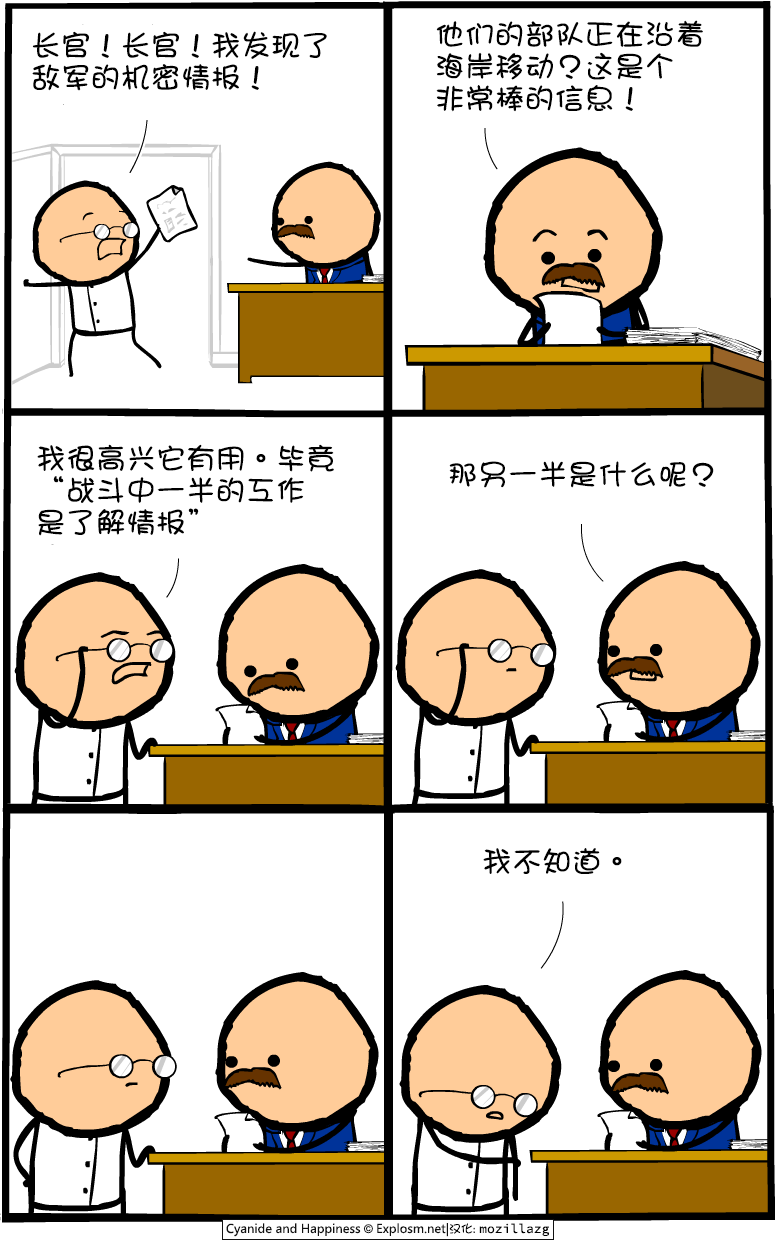
<style>
.page{position:relative;width:780px;height:1245px;background:#ffffff}
.page>*{position:absolute;margin:0}
.t1{font:30px/32px "DFGirl";color:#000000}
.t2{font:30px "DFGirl";color:#000000}
</style>
<div class="page">
<p class="t1" style="left:436px;top:20px;width:267px;height:92px">他们的部队正在沿着<br>海岸移动？这是个<br>非常棒的信息！</p>
<p class="t1" style="left:32px;top:31px;width:295px;height:60px">长官！长官！我发现了<br>敌军的机密情报！</p>
<p class="t1" style="left:37px;top:444px;width:297px;height:92px">我很高兴它有用。毕竟<br>“战斗中一半的工作<br>是了解情报”</p>
<p class="t2" style="left:449px;top:461px;width:265px;height:27px">那另一半是什么呢？</p>
<p class="t2" style="left:483px;top:848px;width:139px;height:26px">我不知道。</p>
</div>
